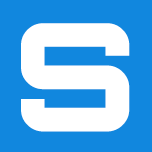
<style>
.page{position:relative;width:152px;height:152px;background:#1187de}
.page>*{position:absolute;margin:0}
.t1{font:150px "Orbitron-Black";letter-spacing:-0.03em;color:#ffffff}
</style>
<div class="page">
<p class="t1" style="left:21px;top:23px;width:109px;height:109px">S</p>
</div>
